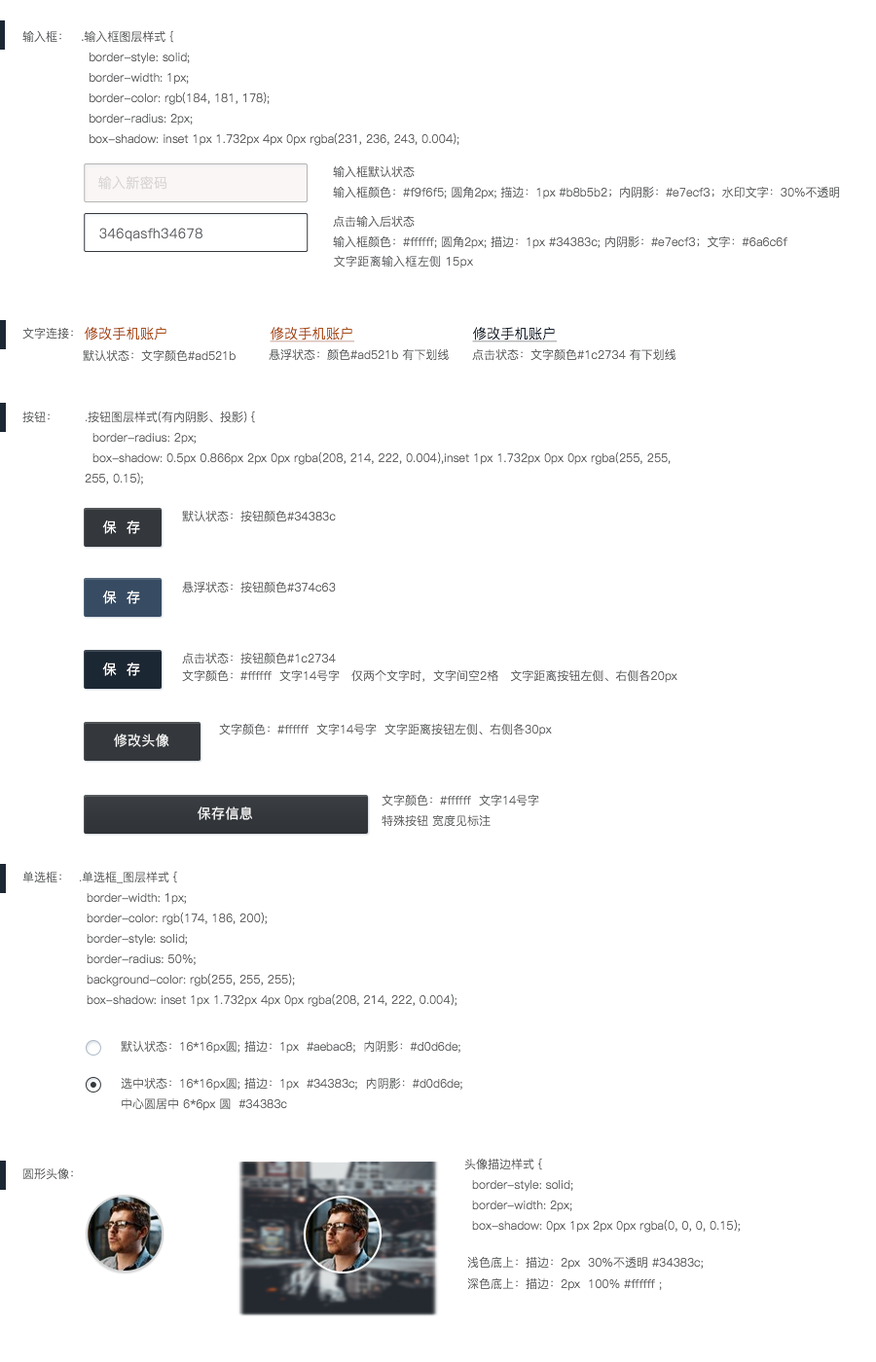
<style>
.page{position:relative;width:876px;height:1362px;background:#ffffff}
.page>*{position:absolute;margin:0}
.t1{font:11.7px "PingFang-SC-Regular";color:#68696b}
.t2{font:13.6px "PingFang-SC-Regular";letter-spacing:0.025em;color:#d9d7d6}
.t3{font:13.6px "PingFang-SC-Regular";letter-spacing:0.025em;color:#6a6c6f}
.t4{font:11.7px "PingFang-SC-Regular";letter-spacing:0.025em;color:#6a6c6f}
.t5{font:13.6px "PingFang-SC-Regular";letter-spacing:0.025em;color:#ad521b}
.t6{font:13.6px "PingFang-SC-Regular";letter-spacing:0.025em;color:#ad521b;text-decoration:underline}
.t7{font:13.6px "PingFang-SC-Regular";letter-spacing:0.025em;color:#1c2734;text-decoration:underline}
.t8{font:13.6px "PingFang-SC-Regular";letter-spacing:0.025em;color:#ffffff}
.t9{font:13.6px "PingFang-SC-Medium";letter-spacing:0.025em;color:#ffffff}
</style>
<div class="page">
<p class="t1" style="left:22px;top:30px;width:39px;height:13px">输入框：</p>
<p class="t1" style="left:82px;top:30px;width:377px;height:116px">.输入框图层样式 {<br>  border-style: solid;<br>  border-width: 1px;<br>  border-color: rgb(184, 181, 178);<br>  border-radius: 2px;<br>  box-shadow: inset 1px 1.732px 4px 0px rgba(231, 236, 243, 0.004);</p>
<p class="t1" style="left:333px;top:165px;width:507px;height:34px">输入框默认状态<br>输入框颜色：#f9f6f5; 圆角2px; 描边：1px #b8b5b2；内阴影：#e7ecf3；水印文字：30%不透明 #6a6c6f</p>
<p class="t2" style="left:98px;top:176px;width:69px;height:14px">输入新密码</p>
<p class="t1" style="left:333px;top:215px;width:454px;height:34px">点击输入后状态<br>输入框颜色：#ffffff; 圆角2px; 描边：1px #34383c; 内阴影：#e7ecf3；文字：#6a6c6f</p>
<p class="t3" style="left:99px;top:228px;width:103px;height:13px">346qasfh34678</p>
<p class="t4" style="left:334px;top:255px;width:139px;height:13px">文字距离输入框左侧 15px</p>
<p class="t1" style="left:22px;top:327px;width:51px;height:13px">文字连接：</p>
<p class="t5" style="left:85px;top:327px;width:81px;height:13px">修改手机账户</p>
<p class="t6" style="left:269px;top:327px;width:85px;height:15px">修改手机账户</p>
<p class="t7" style="left:472px;top:327px;width:84px;height:15px">修改手机账户</p>
<p class="t1" style="left:83px;top:349px;width:152px;height:13px">默认状态：文字颜色#ad521b</p>
<p class="t1" style="left:268px;top:348px;width:180px;height:13px">悬浮状态：颜色#ad521b 有下划线</p>
<p class="t1" style="left:472px;top:348px;width:204px;height:13px">点击状态：文字颜色#1c2734 有下划线</p>
<p class="t1" style="left:22px;top:411px;width:28px;height:12px">按钮：</p>
<p class="t1" style="left:85px;top:411px;width:585px;height:73px">.按钮图层样式(有内阴影、投影) {<br>  border-radius: 2px;<br>  box-shadow: 0.5px 0.866px 2px 0px rgba(208, 214, 222, 0.004),inset 1px 1.732px 0px 0px rgba(255, 255, 255, 0.15);</p>
<p class="t1" style="left:182px;top:510px;width:154px;height:12px">默认状态：按钮颜色#34383c</p>
<p class="t8" style="left:102px;top:520px;width:38px;height:14px">保  存</p>
<p class="t1" style="left:182px;top:581px;width:154px;height:12px">悬浮状态：按钮颜色#374c63</p>
<p class="t8" style="left:102px;top:591px;width:38px;height:13px">保  存</p>
<p class="t1" style="left:182px;top:652px;width:154px;height:12px">点击状态：按钮颜色#1c2734</p>
<p class="t8" style="left:102px;top:662px;width:38px;height:14px">保  存</p>
<p class="t1" style="left:182px;top:669px;width:495px;height:14px">文字颜色：#ffffff  文字14号字   仅两个文字时，文字间空2格   文字距离按钮左侧、右侧各20px</p>
<p class="t1" style="left:219px;top:723px;width:333px;height:13px">文字颜色：#ffffff  文字14号字  文字距离按钮左侧、右侧各30px</p>
<p class="t9" style="left:114px;top:734px;width:55px;height:13px">修改头像</p>
<p class="t1" style="left:381px;top:794px;width:158px;height:33px">文字颜色：#ffffff  文字14号字 <br>特殊按钮 宽度见标注</p>
<p class="t9" style="left:197px;top:806px;width:55px;height:14px">保存信息</p>
<p class="t1" style="left:22px;top:871px;width:39px;height:12px">单选框：</p>
<p class="t1" style="left:79px;top:871px;width:378px;height:136px">.单选框_图层样式 {<br>  border-width: 1px;<br>  border-color: rgb(174, 186, 200);<br>  border-style: solid;<br>  border-radius: 50%;<br>  background-color: rgb(255, 255, 255);<br>  box-shadow: inset 1px 1.732px 4px 0px rgba(208, 214, 222, 0.004);</p>
<p class="t1" style="left:121px;top:1040px;width:339px;height:14px">默认状态：16*16px圆; 描边：1px  #aebac8;  内阴影：#d0d6de;</p>
<p class="t1" style="left:121px;top:1077px;width:341px;height:34px">选中状态：16*16px圆; 描边：1px  #34383c;  内阴影：#d0d6de;<br>中心圆居中 6*6px 圆  #34383c</p>
<p class="t1" style="left:464px;top:1158px;width:276px;height:75px">头像描边样式 {<br>  border-style: solid;<br>  border-width: 2px;<br>  box-shadow: 0px 1px 2px 0px rgba(0, 0, 0, 0.15);</p>
<p class="t1" style="left:23px;top:1167px;width:50px;height:13px">圆形头像：</p>
<p class="t1" style="left:467px;top:1256px;width:236px;height:14px">浅色底上：描边：2px  30%不透明 #34383c;</p>
<p class="t1" style="left:467px;top:1277px;width:195px;height:14px">深色底上：描边：2px  100% #ffffff ;</p>
</div>
